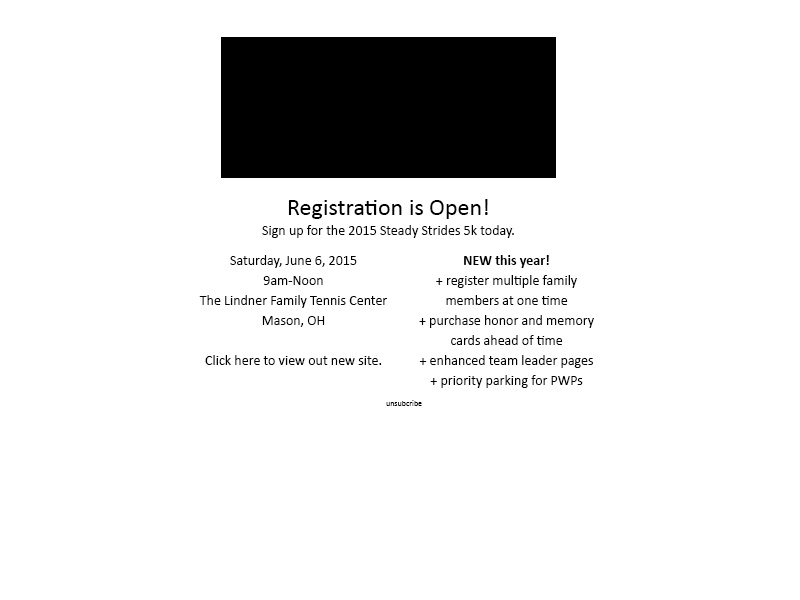
<style>
.page{position:relative;width:800px;height:600px;background:#ffffff}
.page>*{position:absolute;margin:0}
.t1{font:14px/20px "Calibri";color:#000000}
.t2{font:24px/20px "Calibri";color:#000000}
.t3{font:14px/20px "Calibri-Bold";color:#000000}
.t4{font:8px "Calibri";color:#000000}
</style>
<div class="page">
<p class="t1" style="left:262px;top:199px;width:252px;height:39px;text-align:center"><span class="t2">Registration is Open!<br></span>Sign up for the 2015 Steady Strides 5k today.</p>
<p class="t1" style="left:199px;top:255px;width:188px;height:110px;text-align:center">Saturday, June 6, 2015<br>9am-Noon<br>The Lindner Family Tennis Center<br>Mason, OH<br><br>Click here to view out new site.</p>
<p class="t1" style="left:419px;top:255px;width:175px;height:133px;text-align:center"><span class="t3">NEW this year! <br></span>+ register multiple family <br>members at one time<br>+ purchase honor and memory cards ahead of time<br>+ enhanced team leader pages<br>+ priority parking for PWPs</p>
<p class="t4" style="left:386px;top:400px;width:36px;height:6px">unsubcribe</p>
</div>
